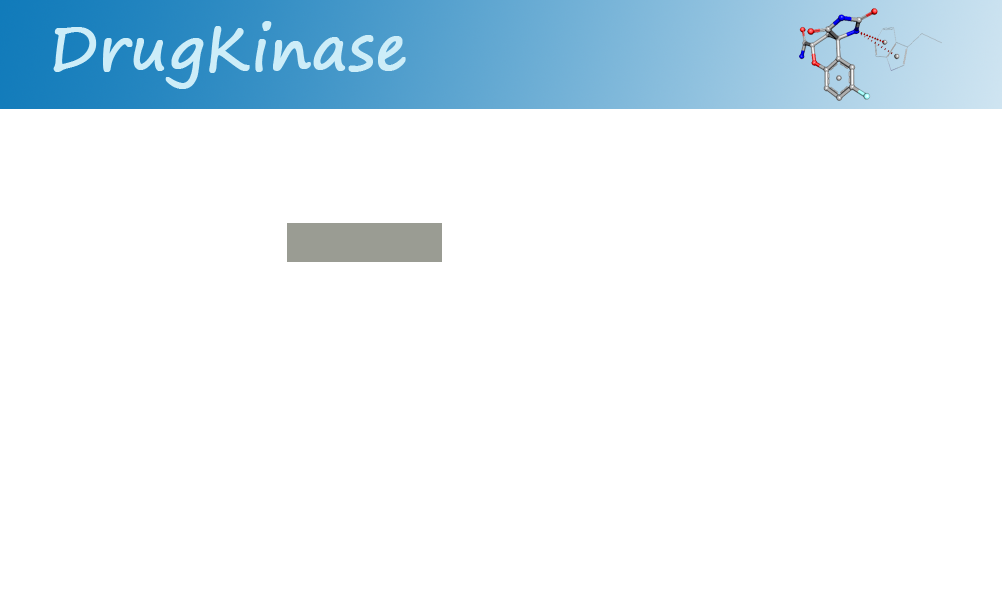
<style>
.page{position:relative;width:1002px;height:615px;background:#ffffff}
.page>*{position:absolute;margin:0}
.t1{font:60px "SegoePrint";color:#cdedf8;font-weight:bold}
</style>
<div class="page">
<p class="t1" style="left:53px;top:21px;width:353px;height:68px">DrugKinase</p>
</div>
